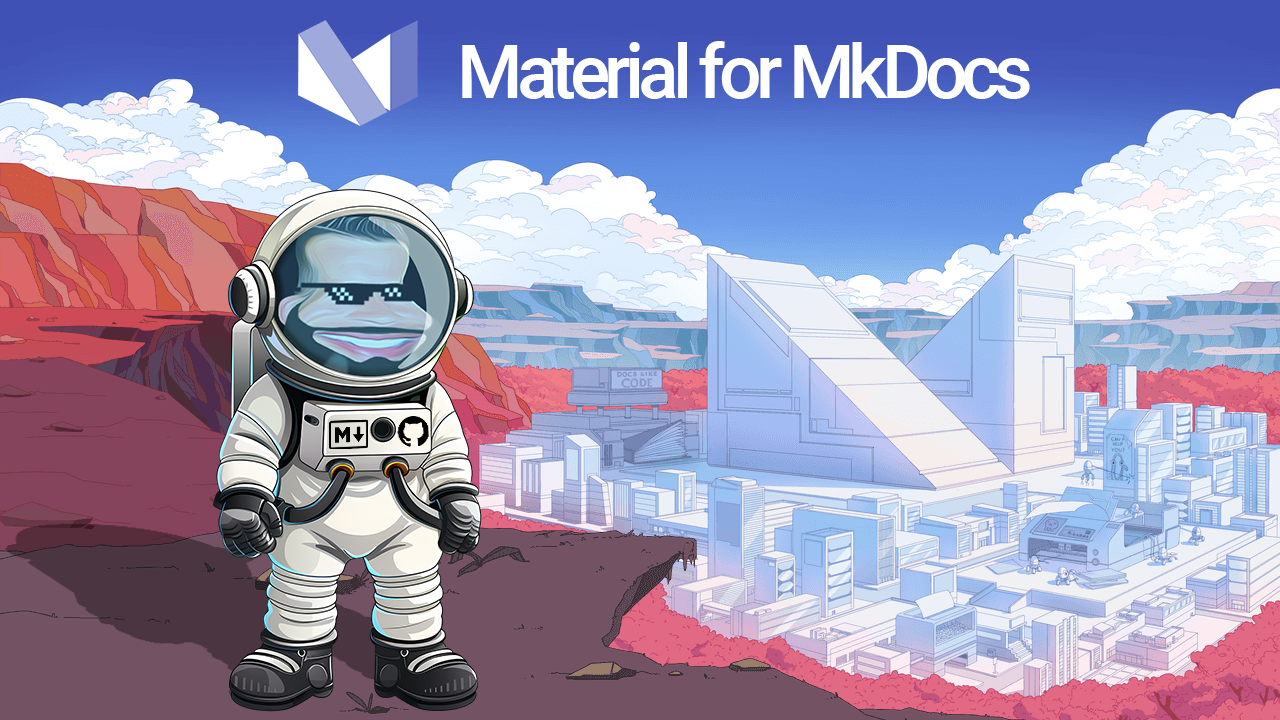
<style>
.page{position:relative;width:1280px;height:720px}
.page>*{position:absolute;margin:0}
.t1{font:75px "Roboto-Medium";letter-spacing:-0.08em;color:#ffffff}
</style>
<div class="page">
<p class="t1" style="left:462px;top:41px;width:568px;height:58px">Material for MkDocs</p>
</div>
